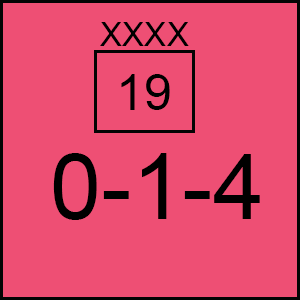
<style>
.page{position:relative;width:300px;height:300px;background:#ee4f74}
.page>*{position:absolute;margin:0}
.t1{font:33.3px "ArialMT";color:#000000}
.t2{font:50px "ArialMT";color:#000000}
.t3{font:91.7px "ArialMT";color:#000000}
</style>
<div class="page">
<p class="t1" style="left:100px;top:22px;width:89px;height:24px">XXXX</p>
<p class="t2" style="left:121px;top:74px;width:49px;height:36px">19</p>
<p class="t3" style="left:53px;top:153px;width:207px;height:67px">0-1-4</p>
</div>
